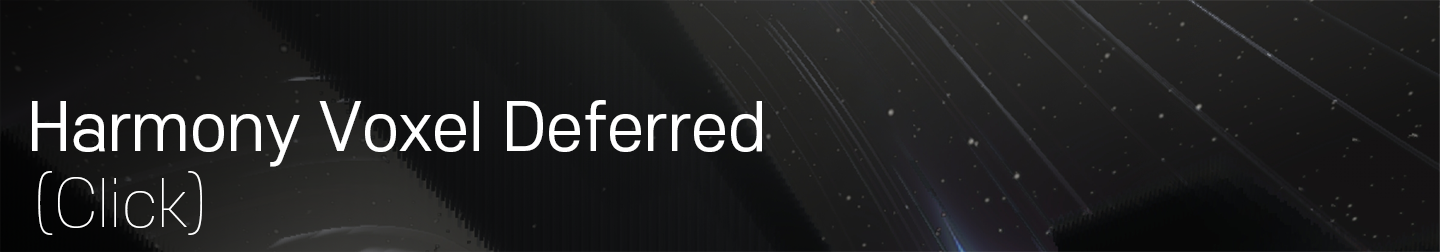
<style>
.page{position:relative;width:1440px;height:252px}
.page>*{position:absolute;margin:0}
.t1{font:64px "S-CoreDream-4Regular";color:#ffffff}
.t2{font:64px "S-CoreDream-1Thin";color:#ffffff}
</style>
<div class="page">
<p class="t1" style="left:32px;top:100px;width:730px;height:67px">Harmony Voxel Deferred</p>
<p class="t2" style="left:38px;top:171px;width:164px;height:64px">(Click)</p>
</div>
